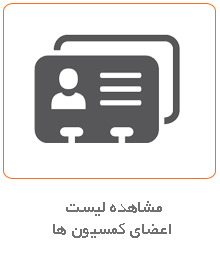
<style>
.page{position:relative;width:220px;height:255px;background:#ffffff}
.page>*{position:absolute;margin:0}
.t1{font:18px "BYekan";color:#707070}
</style>
<div class="page">
<p class="t1" style="left:53px;top:201px;width:118px;height:37px;text-align:center">مشاهده لیست <br>اعضای کمسیون ها</p>
</div>
